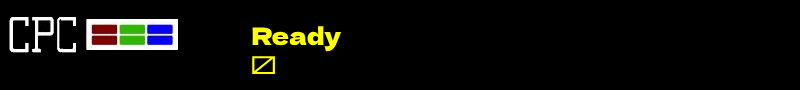
<style>
.page{position:relative;width:800px;height:90px;background:#000000}
.page>*{position:absolute;margin:0}
.t1{font:24px "DelaGothicOne-Regular";color:#ffff00}
</style>
<div class="page">
<p class="t1" style="left:252px;top:26px;width:90px;height:48px">Ready<br>█</p>
</div>
